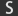
<style>
.page{position:relative;width:18px;height:16px;background:#333333}
.page>*{position:absolute;margin:0}
.t1{font:12px "AdobeHeitiStd-Regular";color:#e4e4e4}
</style>
<div class="page">
<p class="t1" style="left:5px;top:1px;width:8px;height:13px">S</p>
</div>
